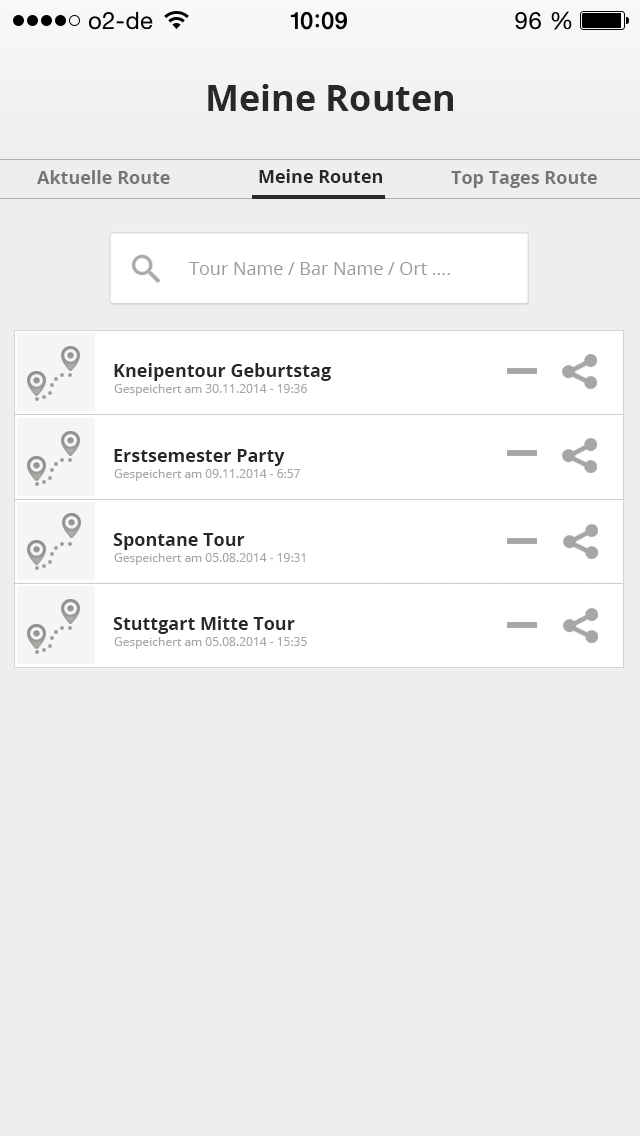
<style>
.page{position:relative;width:640px;height:1136px;background:#eeeeee}
.page>*{position:absolute;margin:0}
.t1{font:36px "OpenSans-Bold";color:#292828}
.t2{font:18px "OpenSans-Bold";color:#757574}
.t3{font:18px "OpenSans-Bold";color:#292828}
.t4{font:18px "OpenSans";color:#9a9a97}
.t5{font:12px "OpenSans";color:#a6a6a6}
</style>
<div class="page">
<p class="t1" style="left:208px;top:84px;width:245px;height:27px">Meine Routen</p>
<p class="t2" style="left:37px;top:170px;width:133px;height:14px">Aktuelle Route</p>
<p class="t3" style="left:259px;top:169px;width:123px;height:14px">Meine Routen</p>
<p class="t2" style="left:451px;top:171px;width:146px;height:17px">Top Tages Route</p>
<p class="t4" style="left:189px;top:262px;width:261px;height:13px">Tour Name / Bar Name / Ort ....</p>
<p class="t3" style="left:114px;top:363px;width:217px;height:18px">Kneipentour Geburtstag</p>
<p class="t5" style="left:114px;top:384px;width:193px;height:12px">Gespeichert am 30.11.2014 - 19:36</p>
<p class="t3" style="left:114px;top:449px;width:171px;height:17px">Erstsemester Party</p>
<p class="t5" style="left:114px;top:469px;width:186px;height:12px">Gespeichert am 09.11.2014 - 6:57</p>
<p class="t3" style="left:113px;top:533px;width:132px;height:17px">Spontane Tour</p>
<p class="t5" style="left:114px;top:553px;width:191px;height:12px">Gespeichert am 05.08.2014 - 19:31</p>
<p class="t3" style="left:113px;top:616px;width:182px;height:18px">Stuttgart Mitte Tour</p>
<p class="t5" style="left:114px;top:637px;width:193px;height:12px">Gespeichert am 05.08.2014 - 15:35</p>
</div>
